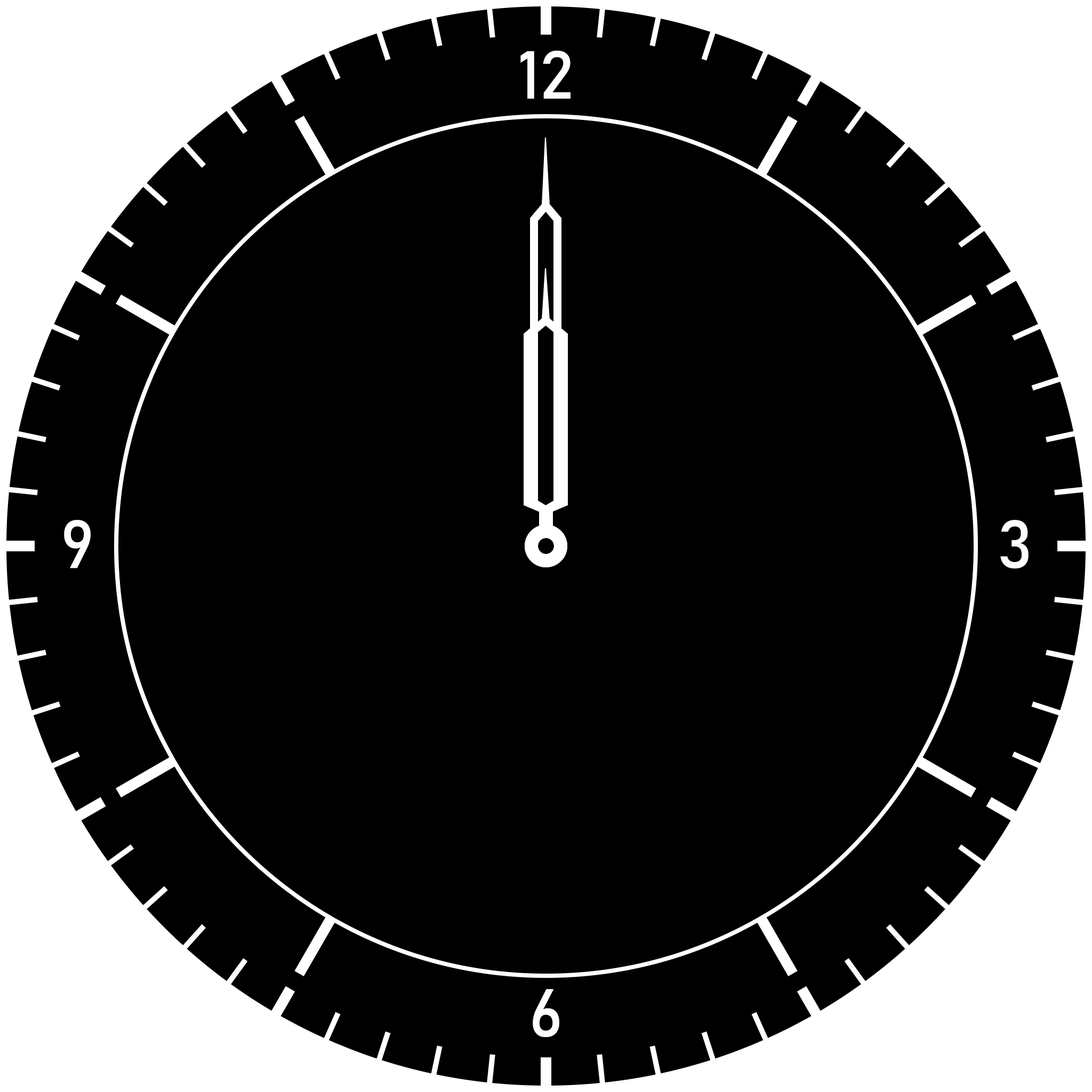
<style>
.page{position:relative;width:1092px;height:1092px;background:#000000}
.page>*{position:absolute;margin:0}
.t1{font:66.6px "Bahnschrift";color:#fffefe}
.t2{font:66.7px "Bahnschrift";color:#fffefe}
</style>
<div class="page">
<p class="t1" style="left:520px;top:51px;width:51px;height:48px">12</p>
<p class="t2" style="left:64px;top:520px;width:27px;height:48px">9</p>
<p class="t2" style="left:1000px;top:520px;width:29px;height:49px">3</p>
<p class="t1" style="left:533px;top:989px;width:26px;height:48px">6</p>
</div>
